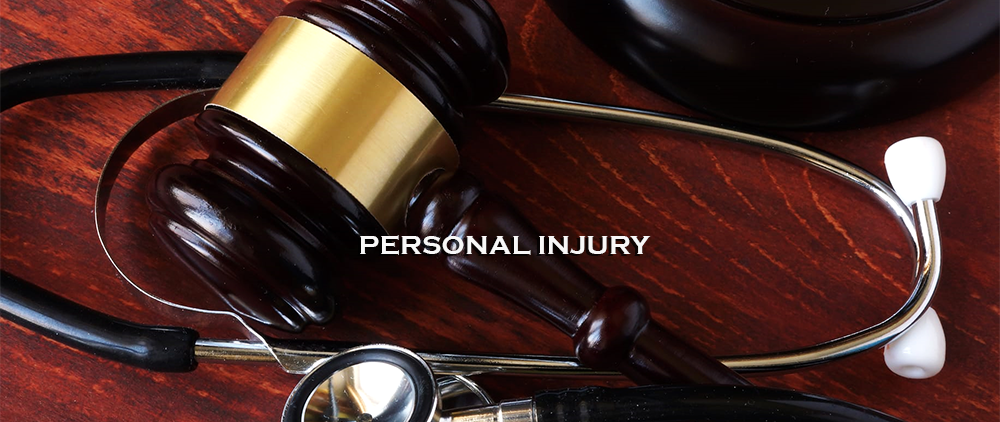
<style>
.page{position:relative;width:1000px;height:422px}
.page>*{position:absolute;margin:0}
.t1{font:27.3px "CopperplateGothic-Bold";color:#f8f7f7}
</style>
<div class="page">
<p class="t1" style="left:360px;top:235px;width:291px;height:20px">PERSONAL INJURY</p>
</div>
